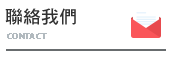
<style>
.page{position:relative;width:171px;height:59px;background:#ffffff}
.page>*{position:absolute;margin:0}
.t1{font:18px "DFHeiStd-W7";color:#313131}
.t2{font:8px "MyriadPro-Regular";letter-spacing:0.025em;color:#b2babf;text-transform:uppercase;font-weight:bold}
</style>
<div class="page">
<p class="t1" style="left:5px;top:8px;width:71px;height:17px">聯絡我們</p>
<p class="t2" style="left:7px;top:33px;width:40px;height:6px">CONTACT</p>
</div>
